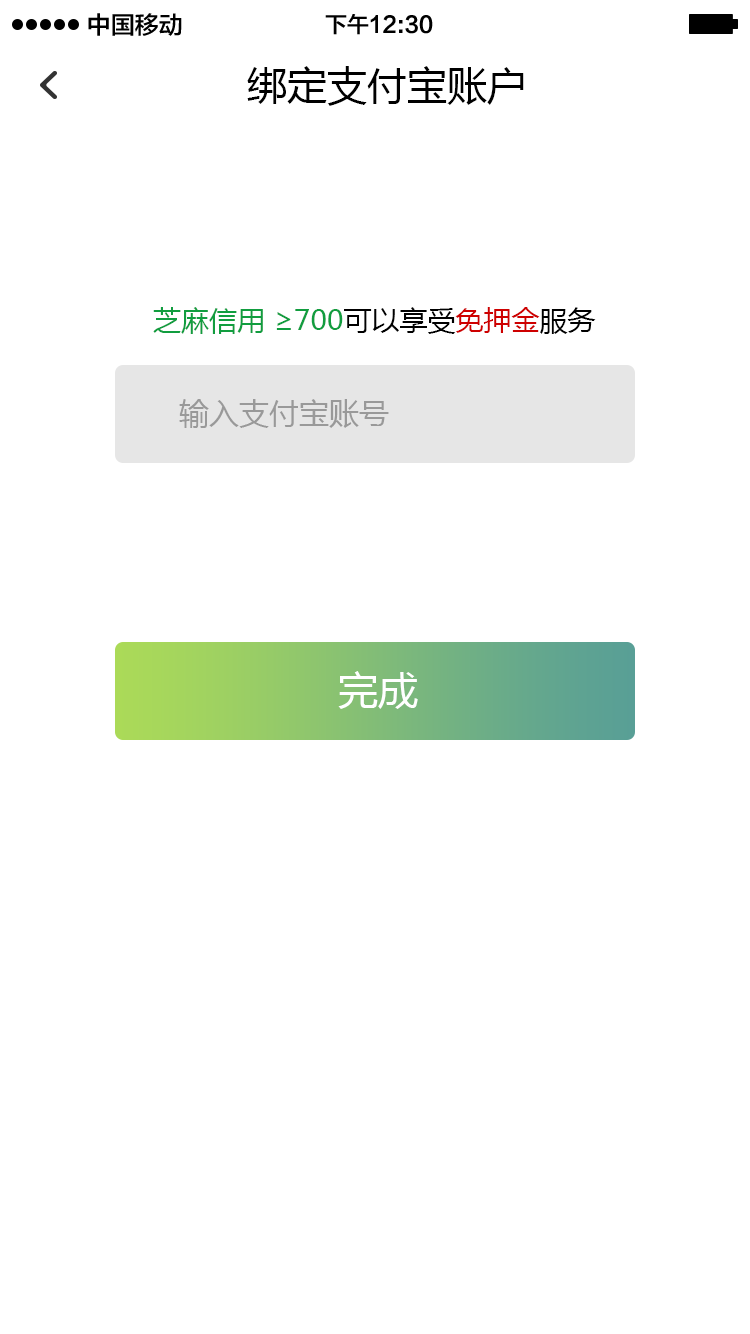
<style>
.page{position:relative;width:750px;height:1334px;background:#ffffff}
.page>*{position:absolute;margin:0}
.t1{font:24px "FZLTZHK--GBK1-0";color:#000000}
.t2{font:22px "FZLTZHK--GBK1-0";color:#000000}
.t3{font:40px "MicrosoftYaHei";color:#000000}
.t4{font:28px "MicrosoftYaHei";color:#119d3f}
.t5{font:28px "MicrosoftYaHei";color:#000000}
.t6{font:28px "MicrosoftYaHei";color:#ce0000}
.t7{font:30px "MicrosoftYaHei";color:#999999}
.t8{font:40px "MicrosoftYaHei";color:#ffffff}
</style>
<div class="page">
<p class="t1" style="left:88px;top:13px;width:94px;height:23px">中国移动</p>
<p class="t2" style="left:325px;top:14px;width:108px;height:21px">下午12:30</p>
<p class="t3" style="left:247px;top:66px;width:277px;height:40px">绑定支付宝账户</p>
<p class="t4" style="left:153px;top:307px;width:443px;height:27px">芝麻信用 ≥700<span class="t5">可以享受</span><span class="t6">免押金</span><span class="t5">服务</span></p>
<p class="t7" style="left:179px;top:399px;width:210px;height:29px">输入支付宝账号</p>
<p class="t8" style="left:338px;top:671px;width:80px;height:38px">完成</p>
</div>
